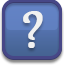
<style>
.page{position:relative;width:64px;height:65px}
.page>*{position:absolute;margin:0}
.t1{font:61.2px "Gabriola";color:#f1f1f1;font-weight:bold}
</style>
<div class="page">
<p class="t1" style="left:23px;top:11px;width:20px;height:37px">?</p>
</div>
